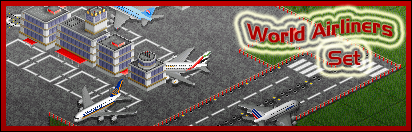
<style>
.page{position:relative;width:412px;height:132px}
.page>*{position:absolute;margin:0}
.t1{font:20px "Slider";color:#ac0000}
</style>
<div class="page">
<p class="t1" style="left:246px;top:18px;width:147px;height:25px">World Airliners</p>
<p class="t1" style="left:328px;top:51px;width:33px;height:14px">Set</p>
</div>
